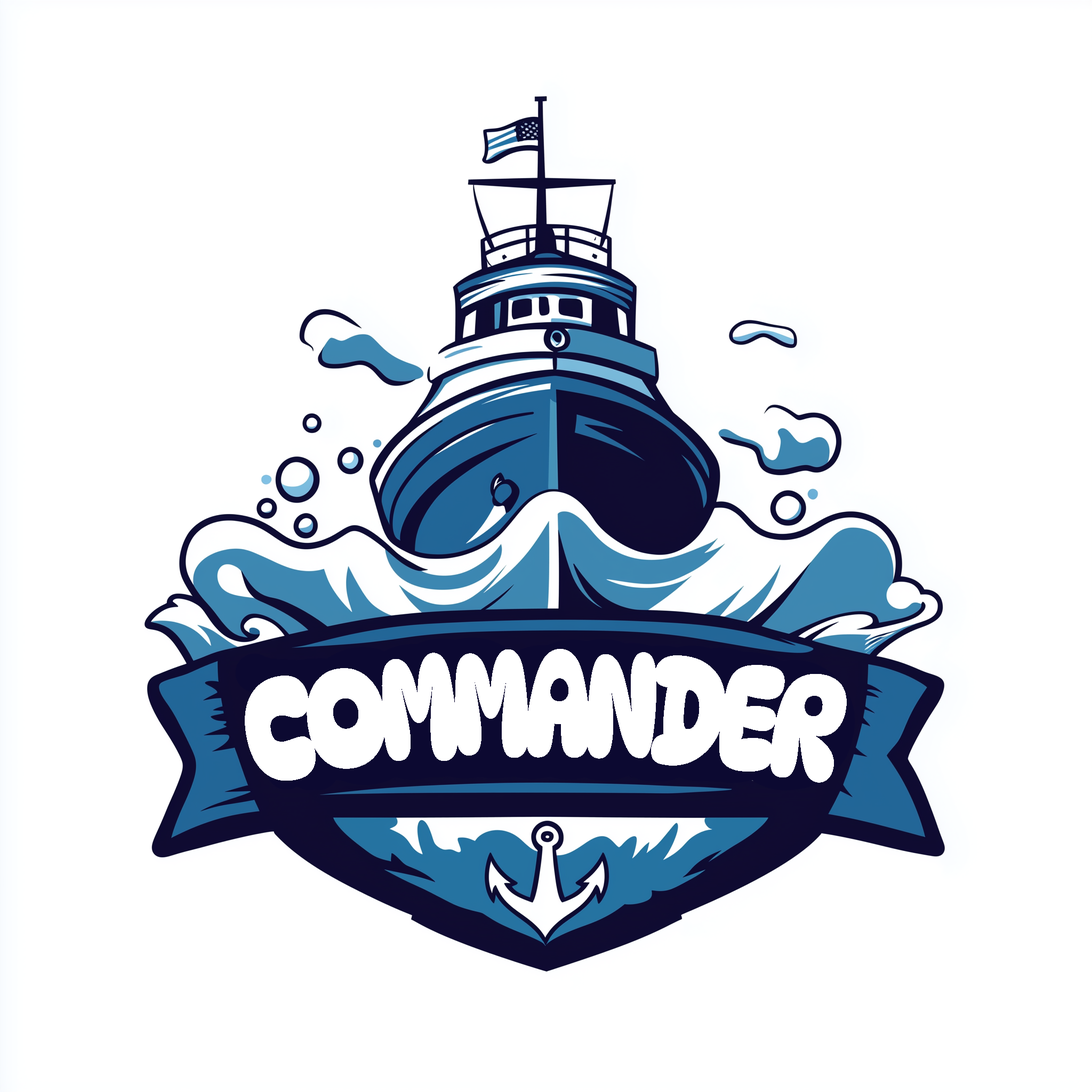
<style>
.page{position:relative;width:1092px;height:1092px;background:#ffffff}
.page>*{position:absolute;margin:0}
.t1{font:145.6px "DynaPuff-Bold";letter-spacing:-0.086em;color:#ffffff;scale:0.69 1}
</style>
<div class="page">
<p class="t1" style="left:245px;top:648px;width:602px;height:135px">COMMANDER</p>
</div>
